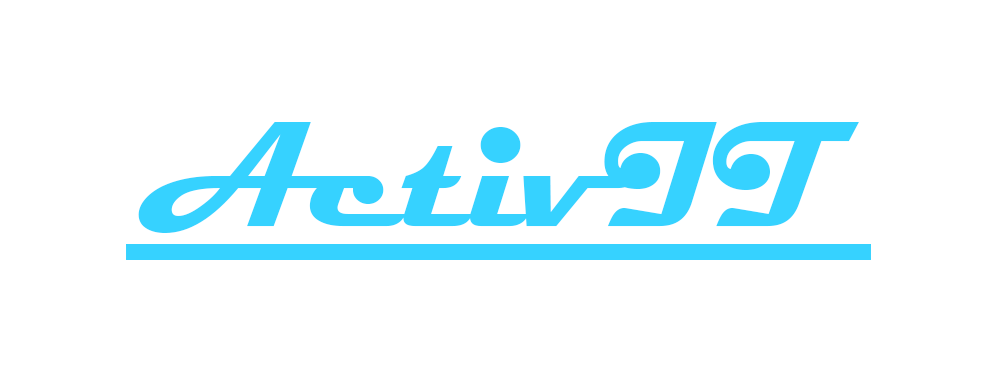
<style>
.page{position:relative;width:1000px;height:373px;background:#ffffff}
.page>*{position:absolute;margin:0}
.t1{font:152.1px "Magneto-Bold";color:#36d2ff}
</style>
<div class="page">
<p class="t1" style="left:138px;top:122px;width:721px;height:111px">ActivIT</p>
</div>
